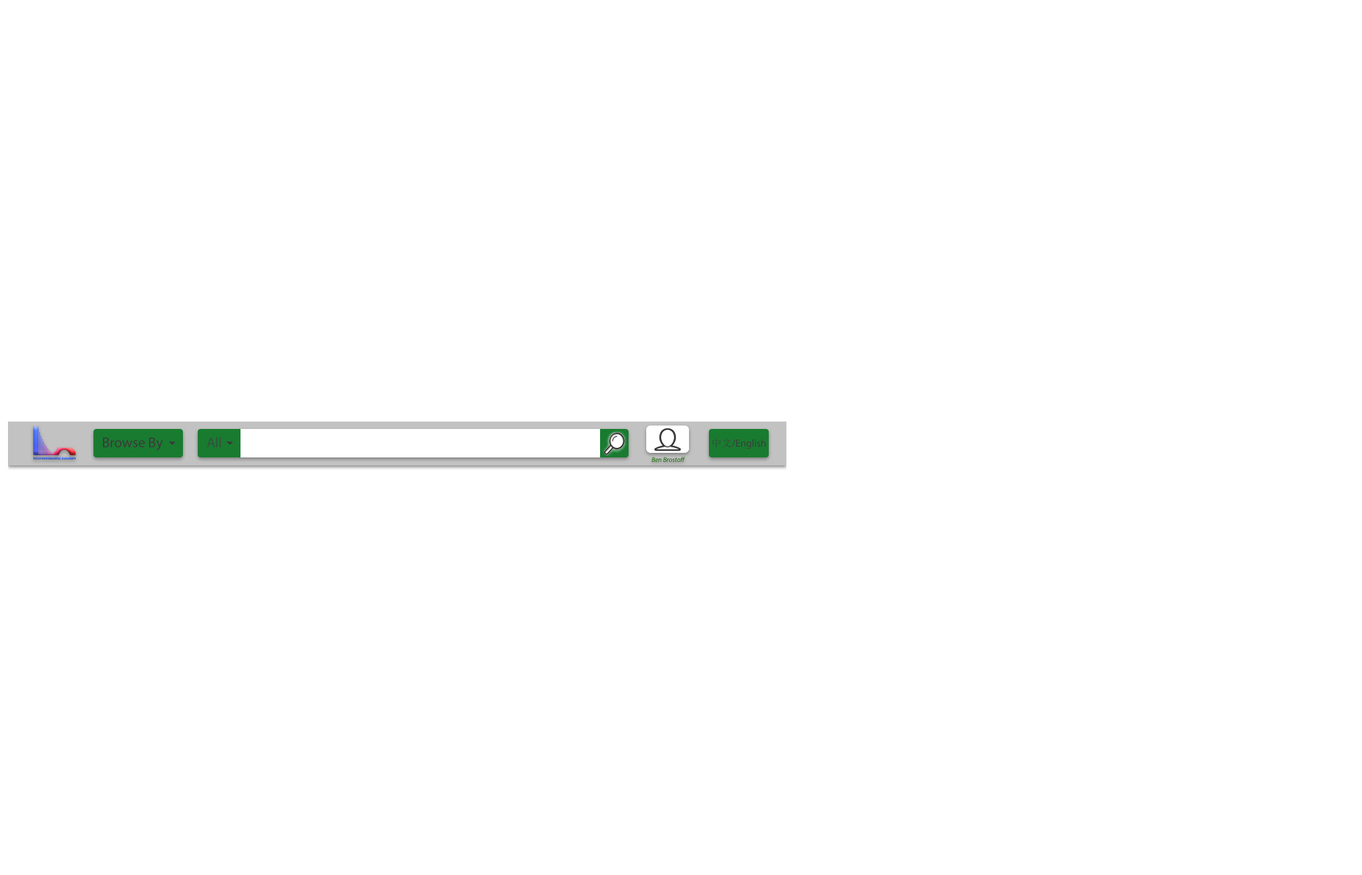
<style>
.page{position:relative;width:1362px;height:875px;background:#ffffff}
.page>*{position:absolute;margin:0}
.t1{font:14.2px "MyriadPro-Regular";color:#393939}
.t2{font:14.2px "MyriadPro-Regular";color:#334d3e}
.t3{font:10.3px "MyriadPro-Regular";color:#393939}
.t4{font:10.3px "SimSun";color:#393939}
.t5{font:6.8px "MyriadPro-It";color:#126b00}
</style>
<div class="page">
<p class="t1" style="left:103px;top:438px;width:60px;height:13px">Browse By</p>
<p class="t2" style="left:207px;top:437px;width:14px;height:10px">All</p>
<p class="t3" style="left:712px;top:438px;width:54px;height:11px"><span class="t4">中文</span>/English</p>
<p class="t5" style="left:651px;top:457px;width:35px;height:5px">Ben Brostoff</p>
</div>
